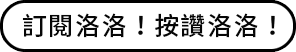
<style>
.page{position:relative;width:296px;height:52px;background:#ffffff}
.page>*{position:absolute;margin:0}
.t1{font:25px "NotoSansCJKtc-Medium";letter-spacing:0.06em;color:#060606}
</style>
<div class="page">
<p class="t1" style="left:22px;top:13px;width:253px;height:25px">訂閱洛洛！按讚洛洛！</p>
</div>
